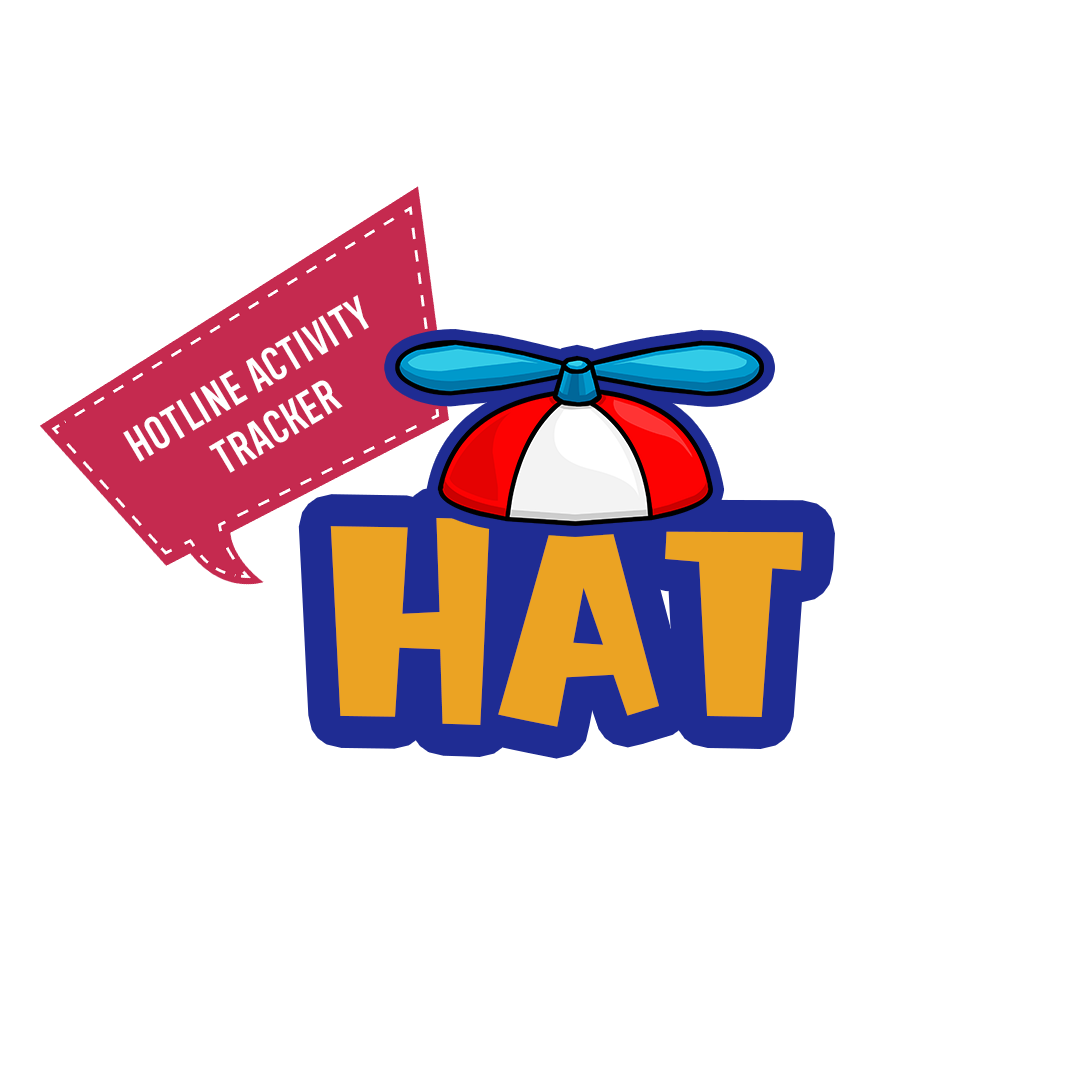
<style>
.page{position:relative;width:1080px;height:1080px;background:#ffffff}
.page>*{position:absolute;margin:0}
.t1{font:46.2px "Xhers";color:#ffffff}
.t2{font:258.6px "Burger-Extra";color:#eca323}
</style>
<div class="page">
<p class="t1" style="left:123px;top:295px;width:246px;height:178px;text-align:center;rotate:-31deg">Hotline Activity<br>Tracker</p>
<p class="t2" style="left:330px;top:518px;width:473px;height:209px">HAT</p>
</div>
